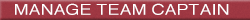
<style>
.page{position:relative;width:250px;height:20px}
.page>*{position:absolute;margin:0}
.t1{font:15px "Helvetica";color:#ffffff;scale:1.2 1}
</style>
<div class="page">
<p class="t1" style="left:15px;top:3px;width:214px;height:12px">MANAGE TEAM CAPTAIN</p>
</div>
